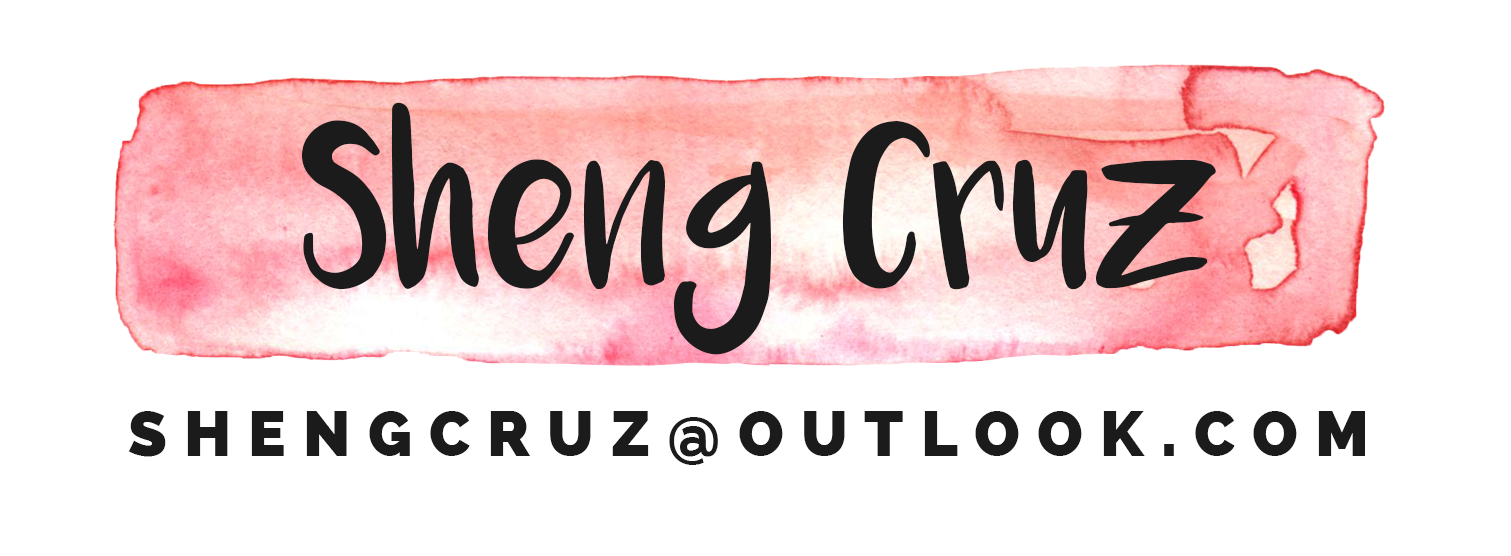
<style>
.page{position:relative;width:1511px;height:556px;background:#ffffff}
.page>*{position:absolute;margin:0}
.t1{font:125px/129.2px "Luna";color:#1b1b1b}
.t2{font:62.5px "Raleway-Heavy";letter-spacing:0.28em;color:#1b1b1b;text-transform:uppercase}
</style>
<div class="page">
<p class="t1" style="left:302px;top:102px;width:914px;height:253px;text-align:center">Sheng Cruz</p>
<p class="t2" style="left:128px;top:411px;width:1237px;height:54px">shengcruz@outlook.com</p>
</div>
